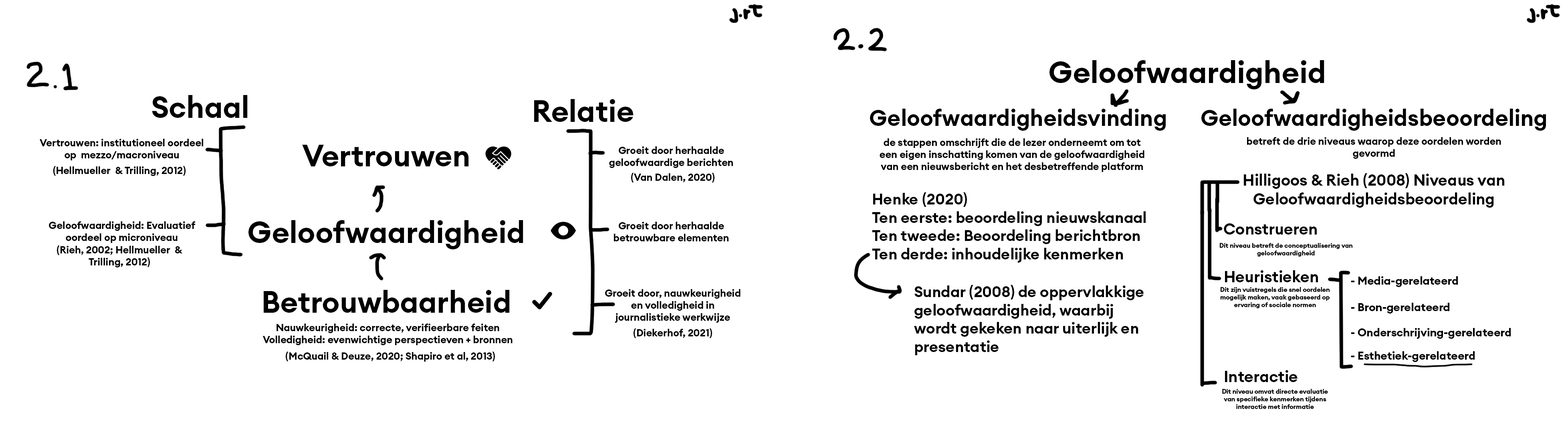
<style>
.page{position:relative;width:1568px;height:433px;background:#ffffff}
.page>*{position:absolute;margin:0}
.t1{font:30.1px "EuclidCircularA-Semibold";color:#000000}
.t2{font:22.4px "EuclidCircularA-Semibold";color:#000000}
.t3{font:10px "EuclidCircularA-Semibold";color:#000000}
.t4{font:15.6px "EuclidCircularA-Semibold";color:#000000}
.t5{font:15.2px "EuclidCircularA-Semibold";color:#000000}
.t6{font:6.4px "EuclidCircularA-Semibold";color:#000000}
.t7{font:11.2px "EuclidCircularA-Semibold";color:#000000}
</style>
<div class="page">
<p class="t1" style="left:1049px;top:60px;width:275px;height:29px">Geloofwaardigheid</p>
<p class="t1" style="left:152px;top:95px;width:96px;height:23px">Schaal</p>
<p class="t1" style="left:534px;top:99px;width:100px;height:23px">Relatie</p>
<p class="t2" style="left:870px;top:109px;width:296px;height:22px">Geloofwaardigheidsvinding</p>
<p class="t2" style="left:1201px;top:109px;width:345px;height:22px">Geloofwaardigheidsbeoordeling</p>
<p class="t3" style="left:1247px;top:137px;width:254px;height:22px;text-align:center">betreft de drie niveaus waarop deze oordelen worden gevormd</p>
<p class="t3" style="left:40px;top:139px;width:163px;height:21px;text-align:center">Vertrouwen: institutioneel oordeel op  mezzo/macroniveau</p>
<p class="t1" style="left:302px;top:145px;width:167px;height:21px">Vertrouwen</p>
<p class="t3" style="left:609px;top:146px;width:124px;height:22px;text-align:center">Groeit door herhaalde geloofwaardige berichten</p>
<p class="t3" style="left:880px;top:138px;width:264px;height:34px;text-align:center">de stappen omschrijft die de lezer onderneemt om tot een eigen inschatting komen van de geloofwaardigheid van een nieuwsbericht en het desbetreffende platform</p>
<p class="t3" style="left:53px;top:166px;width:133px;height:10px">(Hellmueller  &amp; Trilling, 2012)</p>
<p class="t3" style="left:631px;top:173px;width:83px;height:10px">(Van Dalen, 2020)</p>
<p class="t4" style="left:1244px;top:173px;width:260px;height:35px;text-align:center">Hilligoos &amp; Rieh (2008) Niveaus van Geloofwaardigheidsbeoordeling</p>
<p class="t5" style="left:872px;top:192px;width:274px;height:70px">Henke (2020)<br>Ten eerste: beoordeling nieuwskanaal<br>Ten tweede: Beoordeling berichtbron<br>Ten derde: inhoudelijke kenmerken</p>
<p class="t3" style="left:49px;top:221px;width:147px;height:22px;text-align:center">Geloofwaardigheid: Evaluatief oordeel op microniveau</p>
<p class="t1" style="left:248px;top:220px;width:275px;height:29px">Geloofwaardigheid</p>
<p class="t3" style="left:614px;top:222px;width:115px;height:19px;text-align:center">Groeit door herhaalde betrouwbare elementen</p>
<p class="t4" style="left:1224px;top:223px;width:93px;height:11px">Construeren</p>
<p class="t3" style="left:57px;top:245px;width:126px;height:22px;text-align:center">(Rieh, 2002; Hellmueller  &amp; Trilling, 2012)</p>
<p class="t6" style="left:1220px;top:243px;width:132px;height:13px;text-align:center">Dit niveau betreft de conceptualisering van geloofwaardigheid</p>
<p class="t4" style="left:1225px;top:270px;width:93px;height:12px">Heuristieken</p>
<p class="t7" style="left:1351px;top:276px;width:107px;height:11px">- Media-gerelateerd</p>
<p class="t1" style="left:264px;top:290px;width:246px;height:23px">Betrouwbaarheid</p>
<p class="t3" style="left:605px;top:289px;width:136px;height:34px;text-align:center">Groeit door, nauwkeurigheid en volledigheid in journalistieke werkwijze</p>
<p class="t5" style="left:914px;top:285px;width:230px;height:70px">Sundar (2008) de oppervlakkige geloofwaardigheid, waarbij wordt gekeken naar uiterlijk en presentatie</p>
<p class="t6" style="left:1221px;top:287px;width:109px;height:21px;text-align:center">Dit zijn vuistregels die snel oordelen mogelijk maken, vaak gebaseerd op ervaring of sociale normen</p>
<p class="t7" style="left:1351px;top:303px;width:98px;height:10px">- Bron-gerelateerd</p>
<p class="t3" style="left:263px;top:323px;width:250px;height:22px;text-align:center">Nauwkeurigheid: correcte, verifieerbare feiten<br>Volledigheid: evenwichtige perspectieven + bronnen</p>
<p class="t3" style="left:634px;top:328px;width:78px;height:10px">(Diekerhof, 2021)</p>
<p class="t7" style="left:1351px;top:328px;width:160px;height:11px">- Onderschrijving-gerelateerd</p>
<p class="t3" style="left:286px;top:351px;width:209px;height:10px">(McQuail &amp; Deuze, 2020; Shapiro et al, 2013)</p>
<p class="t7" style="left:1351px;top:351px;width:124px;height:11px">- Esthetiek-gerelateerd</p>
<p class="t4" style="left:1225px;top:370px;width:73px;height:12px">Interactie</p>
<p class="t6" style="left:1222px;top:389px;width:106px;height:20px;text-align:center">Dit niveau omvat directe evaluatie van specifieke kenmerken tijdens interactie met informatie</p>
</div>
